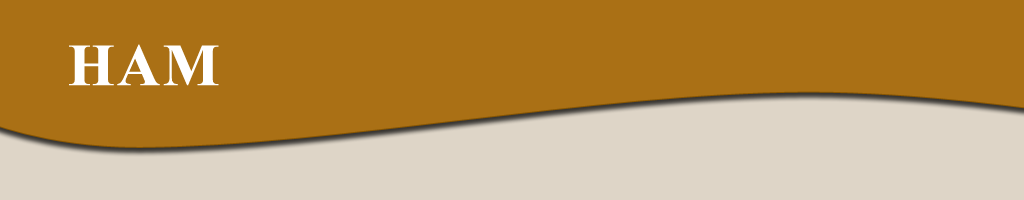
<style>
.page{position:relative;width:1024px;height:200px;background:#aa7015}
.page>*{position:absolute;margin:0}
.t1{font:60px "TimesNewRomanPS-BoldMT";letter-spacing:0.04em;color:#ffffff}
</style>
<div class="page">
<p class="t1" style="left:69px;top:44px;width:150px;height:42px">HAM</p>
</div>
